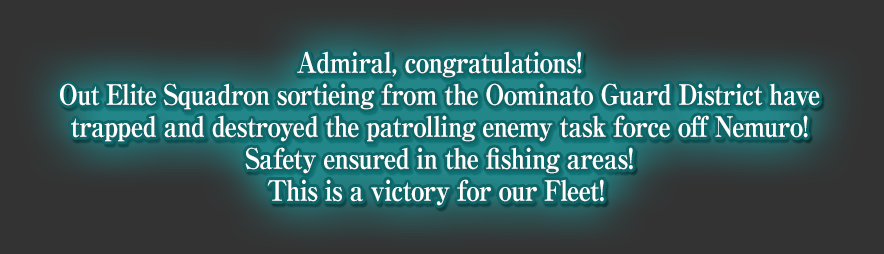
<style>
.page{position:relative;width:884px;height:254px;background:#333333}
.page>*{position:absolute;margin:0}
.t1{font:28px/32px "RyuminPro-ExBold";letter-spacing:-0.04em;color:#ffffff;scale:0.9 1}
</style>
<div class="page">
<p class="t1" style="left:60px;top:51px;width:760px;height:155px;text-align:center">Admiral, congratulations!<br>Out Elite Squadron sortieing from the Oominato Guard District have<br>trapped and destroyed the patrolling enemy task force off Nemuro!<br>Safety ensured in the fishing areas!<br>This is a victory for our Fleet!</p>
</div>
